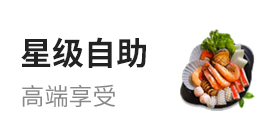
<style>
.page{position:relative;width:280px;height:140px;background:#ffffff}
.page>*{position:absolute;margin:0}
.t1{font:32px "SourceHanSansCN-Bold";color:#222222}
.t2{font:24px "SourceHanSansCN-Regular";color:#888888}
</style>
<div class="page">
<p class="t1" style="left:21px;top:37px;width:125px;height:31px">星级自助</p>
<p class="t2" style="left:22px;top:84px;width:94px;height:23px">高端享受</p>
</div>
